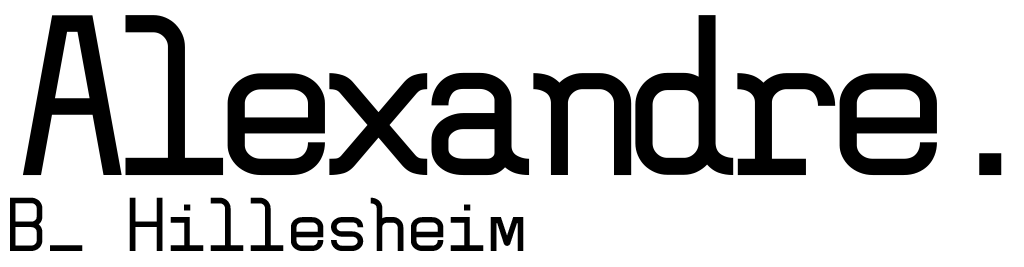
<style>
.page{position:relative;width:1024px;height:267px;background:#ffffff}
.page>*{position:absolute;margin:0}
.t1{font:76.1px/76.1px "AltMonoRegular";letter-spacing:-0.08em;color:#000000}
.t2{font:228.2px/133.1px "AltMonoRegular";letter-spacing:-0.16em;color:#000000}
</style>
<div class="page">
<p class="t1" style="left:10px;top:15px;width:992px;height:236px"><span class="t2">Alexandre.<br></span>B_ Hillesheim</p>
</div>
